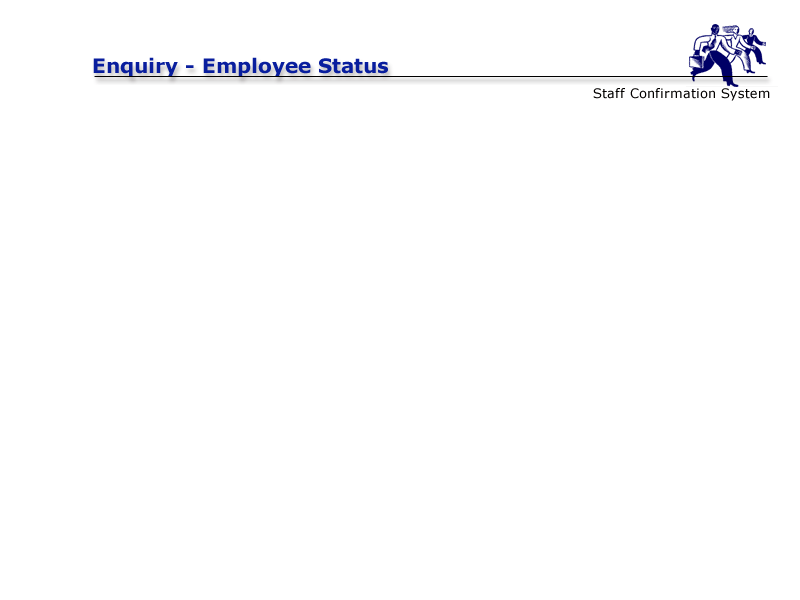
<style>
.page{position:relative;width:800px;height:600px;background:#ffffff}
.page>*{position:absolute;margin:0}
.t1{font:20px "Verdana-Bold";color:#091e9e}
.t2{font:13px "Verdana";color:#030100}
</style>
<div class="page">
<p class="t1" style="left:93px;top:57px;width:295px;height:20px">Enquiry - Employee Status</p>
<p class="t2" style="left:593px;top:88px;width:177px;height:13px">Staff Confirmation System</p>
</div>
